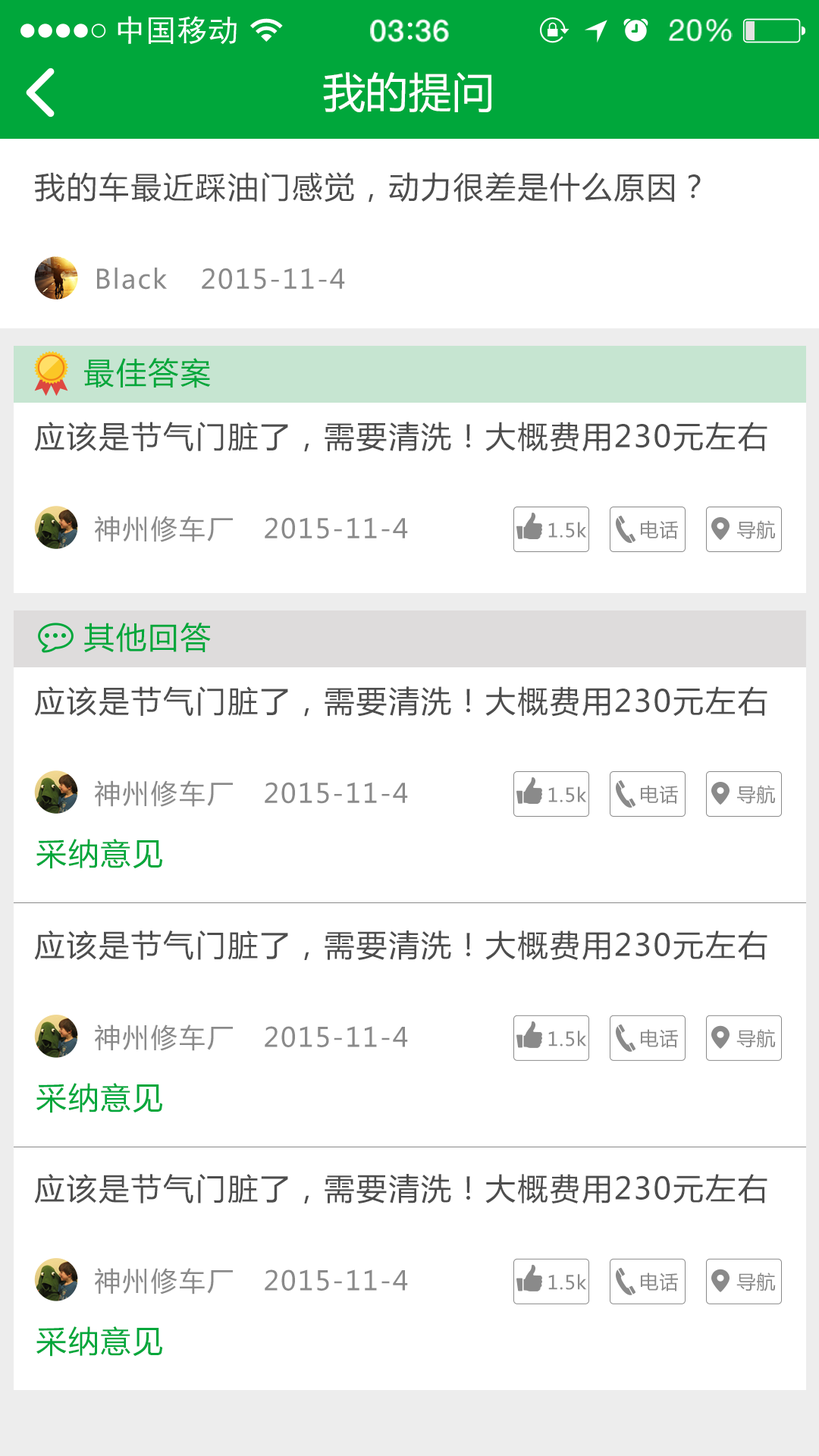
<style>
.page{position:relative;width:819px;height:1456px;background:#ffffff}
.page>*{position:absolute;margin:0}
.t1{font:41.7px "MicrosoftYaHei";letter-spacing:0.02em;color:#ffffff}
.t2{font:30.3px "MicrosoftYaHei";letter-spacing:0.06em;color:#4d4d4d}
.t3{font:26.5px "MicrosoftYaHei";letter-spacing:0.06em;color:#8a8a8a}
.t4{font:30.3px "MicrosoftYaHei";letter-spacing:0.06em;color:#00a73b}
.t5{font:19px "MicrosoftYaHei";letter-spacing:0.04em;color:#8a8a8a}
.t6{font:30.4px "MicrosoftYaHei";letter-spacing:0.06em;color:#4d4d4d}
.t7{font:26.6px "MicrosoftYaHei";letter-spacing:0.06em;color:#8a8a8a}
.t8{font:30.4px "MicrosoftYaHei";letter-spacing:0.06em;color:#00a73b}
</style>
<div class="page">
<p class="t1" style="left:323px;top:72px;width:168px;height:41px">我的提问</p>
<p class="t2" style="left:35px;top:172px;width:666px;height:30px">我的车最近踩油门感觉，动力很差是什么原因？</p>
<p class="t3" style="left:97px;top:267px;width:70px;height:23px">Black</p>
<p class="t3" style="left:202px;top:268px;width:143px;height:22px">2015-11-4</p>
<p class="t4" style="left:84px;top:358px;width:126px;height:30px">最佳答案</p>
<p class="t2" style="left:34px;top:422px;width:733px;height:30px">应该是节气门脏了，需要清洗！大概费用230元左右</p>
<p class="t3" style="left:95px;top:516px;width:138px;height:26px">神州修车厂</p>
<p class="t3" style="left:265px;top:517px;width:143px;height:22px">2015-11-4</p>
<p class="t5" style="left:548px;top:522px;width:39px;height:16px">1.5k</p>
<p class="t5" style="left:641px;top:520px;width:37px;height:19px">电话</p>
<p class="t5" style="left:737px;top:520px;width:38px;height:19px">导航</p>
<p class="t4" style="left:84px;top:623px;width:127px;height:30px">其他回答</p>
<p class="t2" style="left:34px;top:686px;width:733px;height:31px">应该是节气门脏了，需要清洗！大概费用230元左右</p>
<p class="t3" style="left:95px;top:780px;width:138px;height:27px">神州修车厂</p>
<p class="t3" style="left:265px;top:782px;width:143px;height:22px">2015-11-4</p>
<p class="t5" style="left:641px;top:785px;width:37px;height:19px">电话</p>
<p class="t5" style="left:737px;top:785px;width:38px;height:19px">导航</p>
<p class="t5" style="left:548px;top:786px;width:39px;height:16px">1.5k</p>
<p class="t4" style="left:36px;top:839px;width:126px;height:30px">采纳意见</p>
<p class="t6" style="left:34px;top:930px;width:733px;height:30px">应该是节气门脏了，需要清洗！大概费用230元左右</p>
<p class="t7" style="left:95px;top:1024px;width:138px;height:27px">神州修车厂</p>
<p class="t7" style="left:265px;top:1026px;width:143px;height:21px">2015-11-4</p>
<p class="t5" style="left:548px;top:1031px;width:39px;height:15px">1.5k</p>
<p class="t5" style="left:641px;top:1029px;width:37px;height:19px">电话</p>
<p class="t5" style="left:736px;top:1029px;width:40px;height:19px">导航</p>
<p class="t8" style="left:36px;top:1083px;width:126px;height:30px">采纳意见</p>
<p class="t6" style="left:34px;top:1174px;width:733px;height:29px">应该是节气门脏了，需要清洗！大概费用230元左右</p>
<p class="t7" style="left:95px;top:1268px;width:138px;height:26px">神州修车厂</p>
<p class="t7" style="left:265px;top:1269px;width:143px;height:22px">2015-11-4</p>
<p class="t5" style="left:548px;top:1274px;width:39px;height:16px">1.5k</p>
<p class="t5" style="left:641px;top:1272px;width:37px;height:19px">电话</p>
<p class="t5" style="left:736px;top:1272px;width:40px;height:19px">导航</p>
<p class="t8" style="left:36px;top:1326px;width:126px;height:31px">采纳意见</p>
</div>
